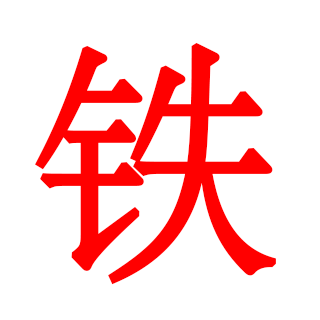
<style>
.page{position:relative;width:320px;height:320px;background:#ffffff}
.page>*{position:absolute;margin:0}
.t1{font:250px "AdobeSongStd-Light";letter-spacing:0.2em;color:#ff0000;font-weight:bold}
</style>
<div class="page">
<p class="t1" style="left:35px;top:42px;width:241px;height:243px">铁</p>
</div>
